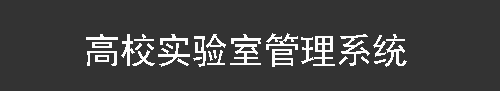
<style>
.page{position:relative;width:500px;height:91px;background:#333333}
.page>*{position:absolute;margin:0}
.t1{font:36px "SimHei";color:#fdfdfd}
</style>
<div class="page">
<p class="t1" style="left:86px;top:33px;width:321px;height:34px">高校实验室管理系统</p>
</div>
